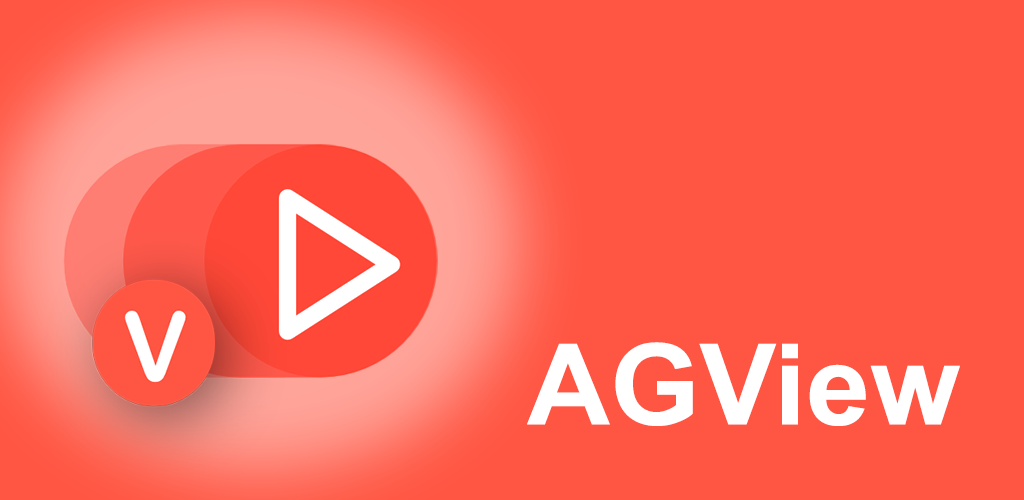
<style>
.page{position:relative;width:1024px;height:500px;background:#ff5643}
.page>*{position:absolute;margin:0}
.t1{font:112.3px "Arial-BoldMT";color:#ffffff}
</style>
<div class="page">
<p class="t1" style="left:527px;top:342px;width:433px;height:84px">AGView</p>
</div>
